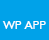
<style>
.page{position:relative;width:49px;height:40px;background:#00a2e9}
.page>*{position:absolute;margin:0}
.t1{font:12.1px "Humanist521BT-Roman";color:#fefefe;scale:1.03 1}
</style>
<div class="page">
<p class="t1" style="left:2px;top:21px;width:44px;height:8px">WP APP</p>
</div>
